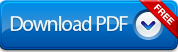
<style>
.page{position:relative;width:178px;height:52px}
.page>*{position:absolute;margin:0}
.t1{font:9px "HelveticaLTStd-Bold";color:#ffffff;text-transform:uppercase}
.t2{font:21px "MyriadPro-Regular";letter-spacing:-0.05em;color:#ecf9fd}
</style>
<div class="page">
<p class="t1" style="left:153px;top:4px;width:22px;height:21px;rotate:45deg">FREE</p>
<p class="t2" style="left:10px;top:16px;width:118px;height:15px">Download PDF</p>
</div>
